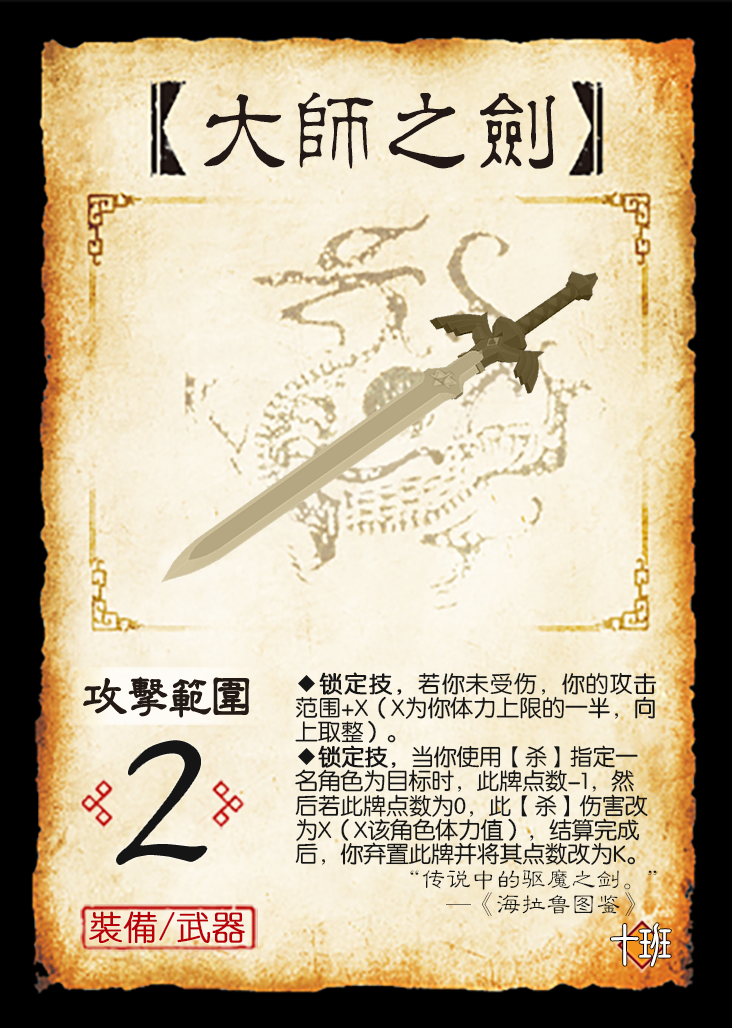
<style>
.page{position:relative;width:732px;height:1028px}
.page>*{position:absolute;margin:0}
.t1{font:95.8px "JMFLS_GBK";color:#221815;scale:0.95 1}
.t2{font:50px "FZLBFW--GB1-0";color:#231915;font-weight:bold;scale:0.9 1}
.t3{font:22.9px/24.2px "FZY3JW--GB1-0";letter-spacing:-0.01em;color:#151515}
.t4{font:22.9px/24.2px "FZY3JW--GB1-0";letter-spacing:-0.01em;color:#151515;font-weight:bold}
.t5{font:233.3px "Jxixinkai";color:#151515}
.t6{font:25px/25px "FZLBJW--GB1-0";color:#151515}
.t7{font:33.3px "YouYuan";color:#ba0007;font-weight:bold}
.t8{font:50px "DFNewChuan-W5-WINP-BF";letter-spacing:-0.4em;color:#ffffff}
</style>
<div class="page">
<p class="t1" style="left:204px;top:92px;width:352px;height:77px">大師之劍</p>
<p class="t2" style="left:83px;top:676px;width:167px;height:42px">攻击范围</p>
<p class="t3" style="left:295px;top:672px;width:362px;height:71px;text-align:justify">◆<span class="t4">锁定技，</span>若你未受伤，你的攻击范围+X（X为你体力上限的一半，向上取整）。</p>
<p class="t5" style="left:117px;top:741px;width:90px;height:123px">2</p>
<p class="t3" style="left:295px;top:745px;width:353px;height:120px">◆<span class="t4">锁定技，</span>当你使用【杀】指定一名角色为目标时，此牌点数-1，然后若此牌点数为0，此【杀】伤害改为X（X该角色体力值），结算完成后，你弃置此牌并将其点数改为K。</p>
<p class="t6" style="left:410px;top:869px;width:247px;height:47px;text-align:right">“传说中的驱魔之剑。”<br>—《海拉鲁图鉴》</p>
<p class="t7" style="left:89px;top:911px;width:156px;height:33px">裝備/武器</p>
<p class="t8" style="left:611px;top:923px;width:60px;height:44px">十班</p>
</div>
